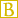
<style>
.page{position:relative;width:18px;height:18px;background:#ffffff}
.page>*{position:absolute;margin:0}
.t1{font:18px "Calligraphic421BT-RomanB";color:#d4b900}
</style>
<div class="page">
<p class="t1" style="left:3px;top:2px;width:11px;height:15px">B</p>
</div>
